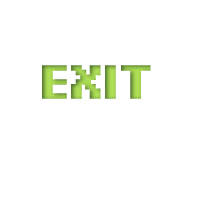
<style>
.page{position:relative;width:200px;height:200px;background:#ffffff}
.page>*{position:absolute;margin:0}
.t1{font:48px "PixelDigivolveCyrillic";font-weight:bold}
</style>
<div class="page">
<p class="t1" style="left:42px;top:65px;width:109px;height:34px">EXIT</p>
</div>
